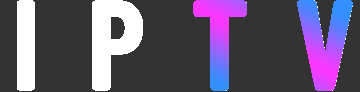
<style>
.page{position:relative;width:360px;height:92px;background:#333333}
.page>*{position:absolute;margin:0}
.t1{font:124px "BarlowCondensed-SemiBold";letter-spacing:0.36em;font-weight:bold}
</style>
<div class="page">
<p class="t1" style="left:17px;top:0px;width:336px;height:91px">IPTV</p>
<p class="t1" style="left:193px;top:0px;width:160px;height:91px">TV</p>
</div>
